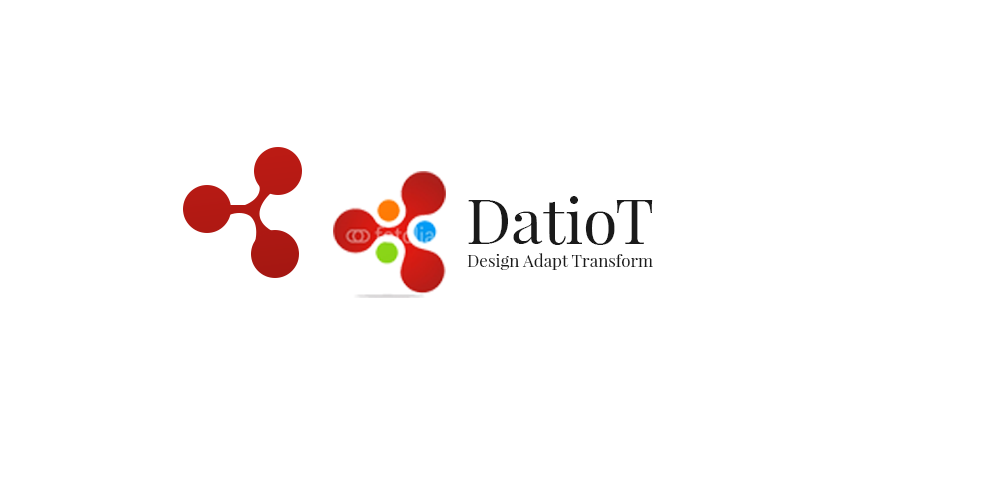
<style>
.page{position:relative;width:1000px;height:500px;background:#ffffff}
.page>*{position:absolute;margin:0}
.t1{font:63px "PlayfairDisplay-Regular";color:#1a1a1a}
.t2{font:17px "PlayfairDisplay-Regular";color:#1a1a1a}
</style>
<div class="page">
<p class="t1" style="left:468px;top:196px;width:185px;height:49px">DatioT</p>
<p class="t2" style="left:467px;top:253px;width:186px;height:17px">Design Adapt Transform</p>
</div>
